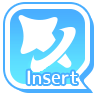
<style>
.page{position:relative;width:96px;height:96px;background:#ffffff}
.page>*{position:absolute;margin:0}
.t1{font:18px "JK-Gothic-M";color:#ffffff}
</style>
<div class="page">
<p class="t1" style="left:27px;top:70px;width:51px;height:15px">Insert</p>
</div>
